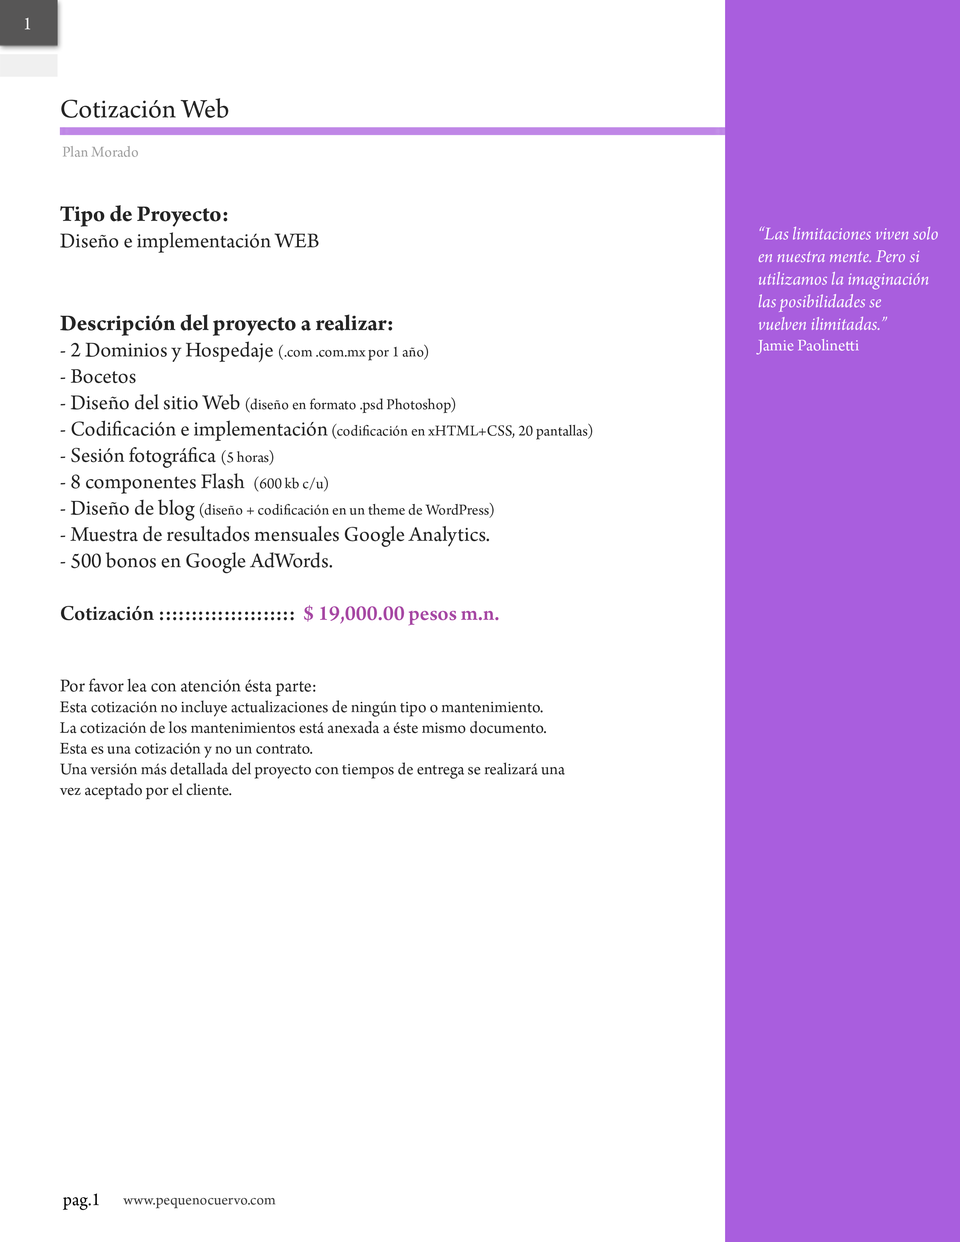
<style>
.page{position:relative;width:960px;height:1242px;background:#ffffff}
.page>*{position:absolute;margin:0}
.t1{font:18.8px "ArnoPro-Regular";color:#fcfcfc}
.t2{font:28.2px "ArnoPro-Regular";color:#252525}
.t3{font:15.7px "ArnoPro-Regular";color:#a0a0a0}
.t4{font:17.3px "ArnoPro-Regular";color:#252525}
.t5{font:23.5px "ArnoPro-Regular";color:#252525}
.t6{font:23.5px "ArnoPro-Bold";color:#252525}
.t7{font:22px "ArnoPro-Regular";color:#252525}
.t8{font:15.7px "ArnoPro-Regular";color:#252525}
.t9{font:22px "ArnoPro-Smbd";color:#252525}
.t10{font:22px "ArnoPro-Smbd";color:#a647a3}
.t11{font:18.8px "ArnoPro-Regular";color:#252525}
.t12{font:18.8px "ArnoPro-Italic";color:#ffffff}
.t13{font:17.3px "ArnoPro-Regular";color:#ffffff}
.t14{font:18.8px "ArnoPro-Regular";color:#010101}
.t15{font:15.7px "ArnoPro-Regular";color:#3c3c3c}
</style>
<div class="page">
<p class="t1" style="left:25px;top:18px;width:5px;height:11px">1</p>
<p class="t2" style="left:61px;top:98px;width:167px;height:20px">Cotización Web</p>
<p class="t3" style="left:62px;top:146px;width:76px;height:11px">Plan Morado</p>
<p class="t4" style="left:59px;top:205px;width:533px;height:595px"><span class="t5"><br></span><span class="t6">Tipo de Proyecto: <br></span><span class="t7">Diseño e implementación WEB<br><br><br></span><span class="t6">Descripción del proyecto a realizar:<br></span><span class="t7">- 2 Dominios y Hospedaje </span><span class="t8">(.com .com.mx por 1 año)<br></span><span class="t7">- Bocetos<br>- Diseño del sitio Web </span><span class="t8">(diseño en formato .psd Photoshop)<br></span><span class="t7">- Codificación e implementación</span><span class="t8"> (codificación en xHTML+CSS, 20 pantallas)<br></span><span class="t7">- Sesión fotográfica </span><span class="t8">(5 horas)<br></span><span class="t7">- 8 componentes Flash  </span><span class="t8">(600 kb c/u) <br></span><span class="t7">- Diseño de blog </span><span class="t8">(diseño + codificación en un theme de WordPress)<br></span><span class="t7">- Muestra de resultados mensuales Google Analytics.<br>- 500 bonos en Google AdWords.<br><br></span><span class="t9">Cotización :::::::::::::::::::::  </span><span class="t10">$ 19,000.00 pesos m.n.<br><br></span><span class="t11"><br>Por favor lea con atención ésta parte:<br></span>Esta cotización no incluye actualizaciones de ningún tipo o mantenimiento.<br>La cotización de los mantenimientos está anexada a éste mismo documento.<br>Esta es una cotización y no un contrato.<br>Una versión más detallada del proyecto con tiempos de entrega se realizará una <br>vez aceptado por el cliente.</p>
<p class="t12" style="left:756px;top:226px;width:182px;height:129px">“Las limitaciones viven solo<br>en nuestra mente. Pero si <br>utilizamos la imaginación<br>las posibilidades se<br>vuelven ilimitadas.”<br><span class="t13">Jamie Paolinetti</span></p>
<p class="t14" style="left:63px;top:1194px;width:36px;height:16px">pag.1</p>
<p class="t15" style="left:123px;top:1198px;width:153px;height:11px">www.pequenocuervo.com</p>
</div>
